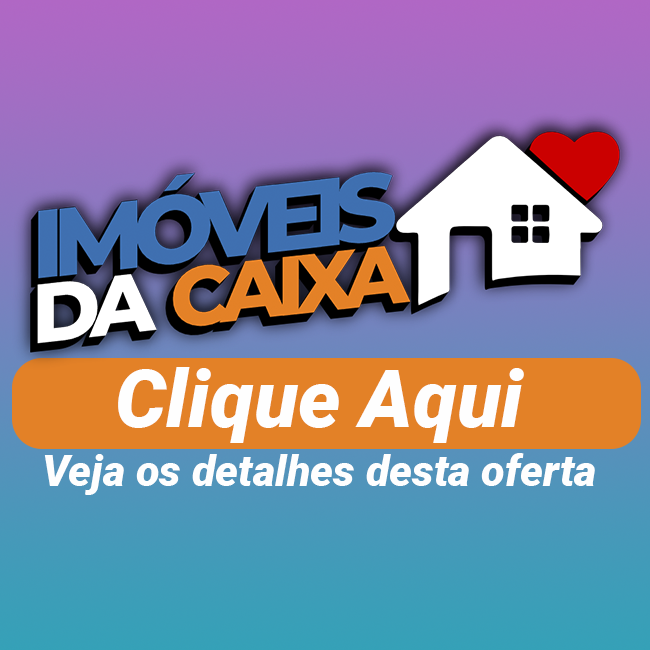
<style>
.page{position:relative;width:650px;height:650px}
.page>*{position:absolute;margin:0}
.t1{font:80px "Roboto-BlackItalic";color:#fefefe}
.t2{font:43px "Roboto-BlackItalic";color:#fefefe}
</style>
<div class="page">
<p class="t1" style="left:118px;top:367px;width:406px;height:76px">Clique Aqui</p>
<p class="t2" style="left:44px;top:453px;width:551px;height:42px">Veja os detalhes desta oferta</p>
</div>
